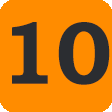
<style>
.page{position:relative;width:112px;height:112px;background:#ff8c00}
.page>*{position:absolute;margin:0}
.t1{font:89px "BookmanOldStyle-Bold";color:#2b2d31;scale:0.95 1}
</style>
<div class="page">
<p class="t1" style="left:12px;top:22px;width:98px;height:63px">10</p>
</div>
